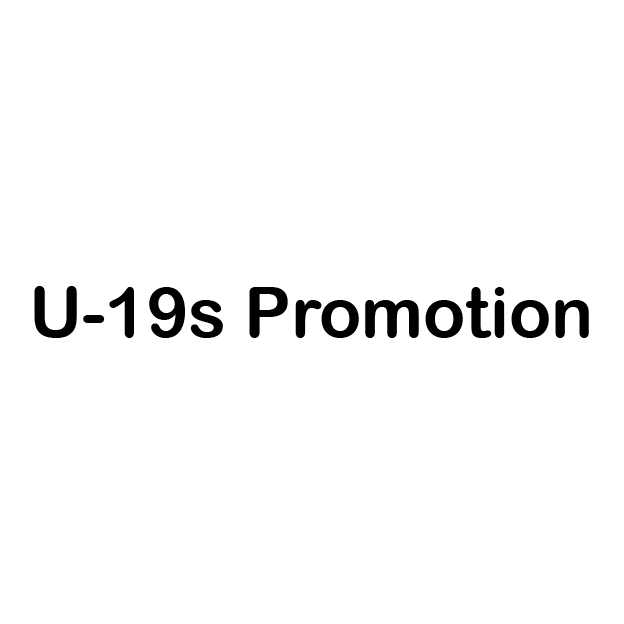
<style>
.page{position:relative;width:624px;height:624px;background:#ffffff}
.page>*{position:absolute;margin:0}
.t1{font:70px "ArialRoundedMTBold";color:#000000}
</style>
<div class="page">
<p class="t1" style="left:34px;top:286px;width:555px;height:52px">U-19s Promotion</p>
</div>
